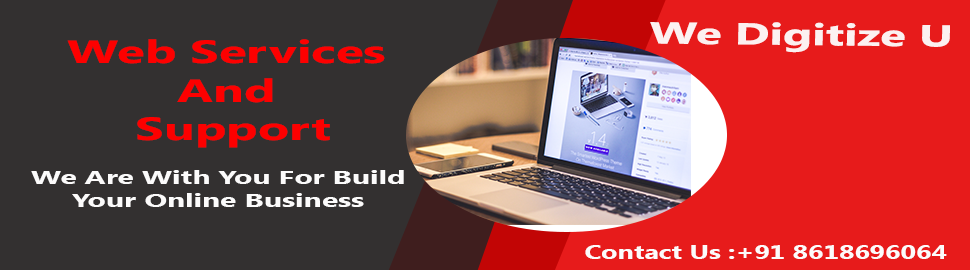
<style>
.page{position:relative;width:970px;height:270px;background:#333030}
.page>*{position:absolute;margin:0}
.t1{font:30.3px "SegoeUI-Bold";color:#fcf1f1;scale:1.56 1}
.t2{font:32.3px "SegoeUI-Bold";color:#fd0000;scale:1.58 1}
.t3{font:18.9px "SegoeUI-Bold";color:#fcfbfb;scale:1.59 1}
.t4{font:19.6px "SegoeUI-Bold";color:#fcfbfb;scale:1.37 1}
</style>
<div class="page">
<p class="t1" style="left:650px;top:22px;width:300px;height:31px;rotate:1deg">We Digitize U</p>
<p class="t2" style="left:67px;top:39px;width:318px;height:109px;text-align:center">Web Services      And<br> Support</p>
<p class="t3" style="left:31px;top:170px;width:373px;height:37px;text-align:center">We Are With You For Build Your Online Business</p>
<p class="t4" style="left:585px;top:245px;width:362px;height:14px">Contact Us :+91 8618696064</p>
</div>
